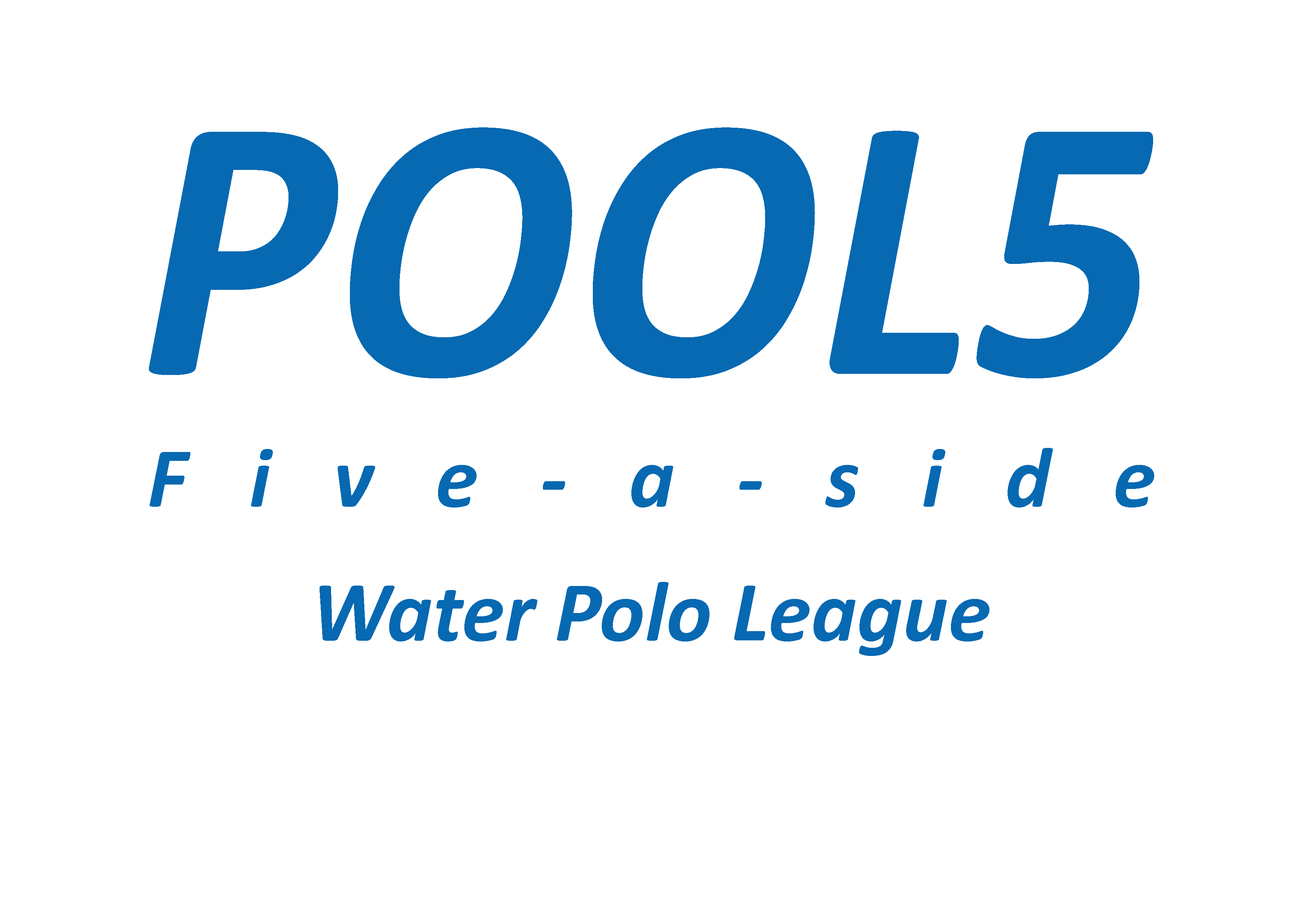
<style>
.page{position:relative;width:1299px;height:918px;background:#ffffff}
.page>*{position:absolute;margin:0}
.t1{font:382.7px "Calibri-BoldItalic";color:#0669b2;scale:0.95 1}
.t2{font:86.1px "Calibri-BoldItalic";color:#0669b2}
.t3{font:106.9px "Calibri-BoldItalic";color:#0669b2}
</style>
<div class="page">
<p class="t1" style="left:149px;top:127px;width:1004px;height:251px">POOL5</p>
<p class="t2" style="left:150px;top:448px;width:1004px;height:60px">Five-a-side</p>
<p class="t2" style="left:320px;top:582px;width:669px;height:74px"><span class="t3"><br></span>Water Polo League</p>
</div>
